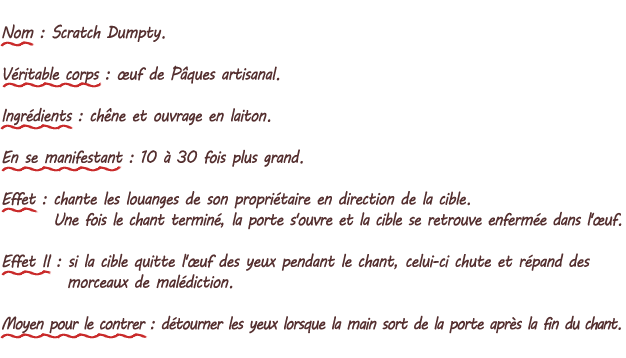
<style>
.page{position:relative;width:626px;height:358px;background:#ffffff}
.page>*{position:absolute;margin:0}
.t1{font:17.3px "MVBoli";letter-spacing:-0.05em;color:#553030;scale:0.9 1}
.t2{font:17.3px "MVBoli";letter-spacing:-0.06em;color:#553030;scale:0.9 1}
.t3{font:17.3px "MVBoli";letter-spacing:-0.075em;color:#553030;scale:0.9 1}
.t4{font:17.3px "MVBoli";letter-spacing:-0.1em;color:#553030;scale:0.9 1}
</style>
<div class="page">
<p class="t1" style="left:2px;top:24px;width:620px;height:310px">Nom : Scratch Dumpty.<br><br>Véritable corps : œuf de Pâques artisanal.<br><br>Ingrédients : chêne et ouvrage en laiton.<br><br>En se manifestant : 10 à 30 fois plus grand.<br><br>Effet : chante les louanges de son propriétaire en direction de la cible.<br>        <span class="t2">Une fois le chant terminé, la porte s'ouvre et la cible se retrouve enfermée dans l'œuf.<br></span><br>Effet II : si la cible quitte l'<span class="t2">œuf</span> des yeux pendant le chant, celui-ci chute et répand des<br>          morceaux de malédiction.<br><br><span class="t3">Moyen pour le contrer : détourner les yeux lorsque la main sort de la porte après la fin </span><span class="t4">du chant.</span></p>
</div>
